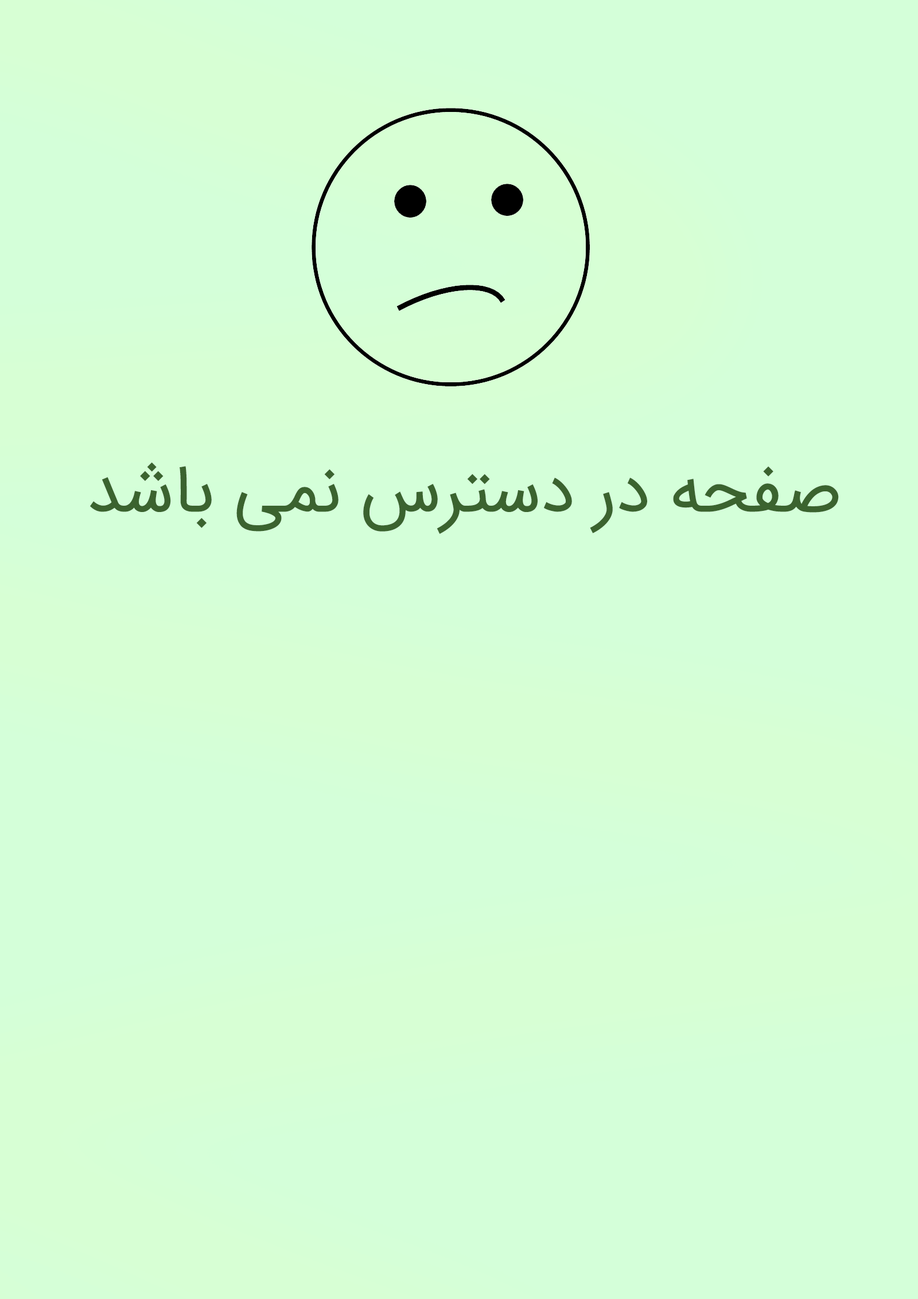
<style>
.page{position:relative;width:918px;height:1299px;background:#d4ffd9}
.page>*{position:absolute;margin:0}
.t1{font:68.9px "IRANSansFaNum";color:#3b632f}
</style>
<div class="page">
<p class="t1" style="left:90px;top:462px;width:749px;height:72px">صفحه در دسترس نمی باشد</p>
</div>
